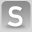
<style>
.page{position:relative;width:32px;height:32px}
.page>*{position:absolute;margin:0}
.t1{font:27.7px "DINMittelschrift";color:#fefefe}
</style>
<div class="page">
<p class="t1" style="left:7px;top:6px;width:16px;height:21px">S</p>
</div>
